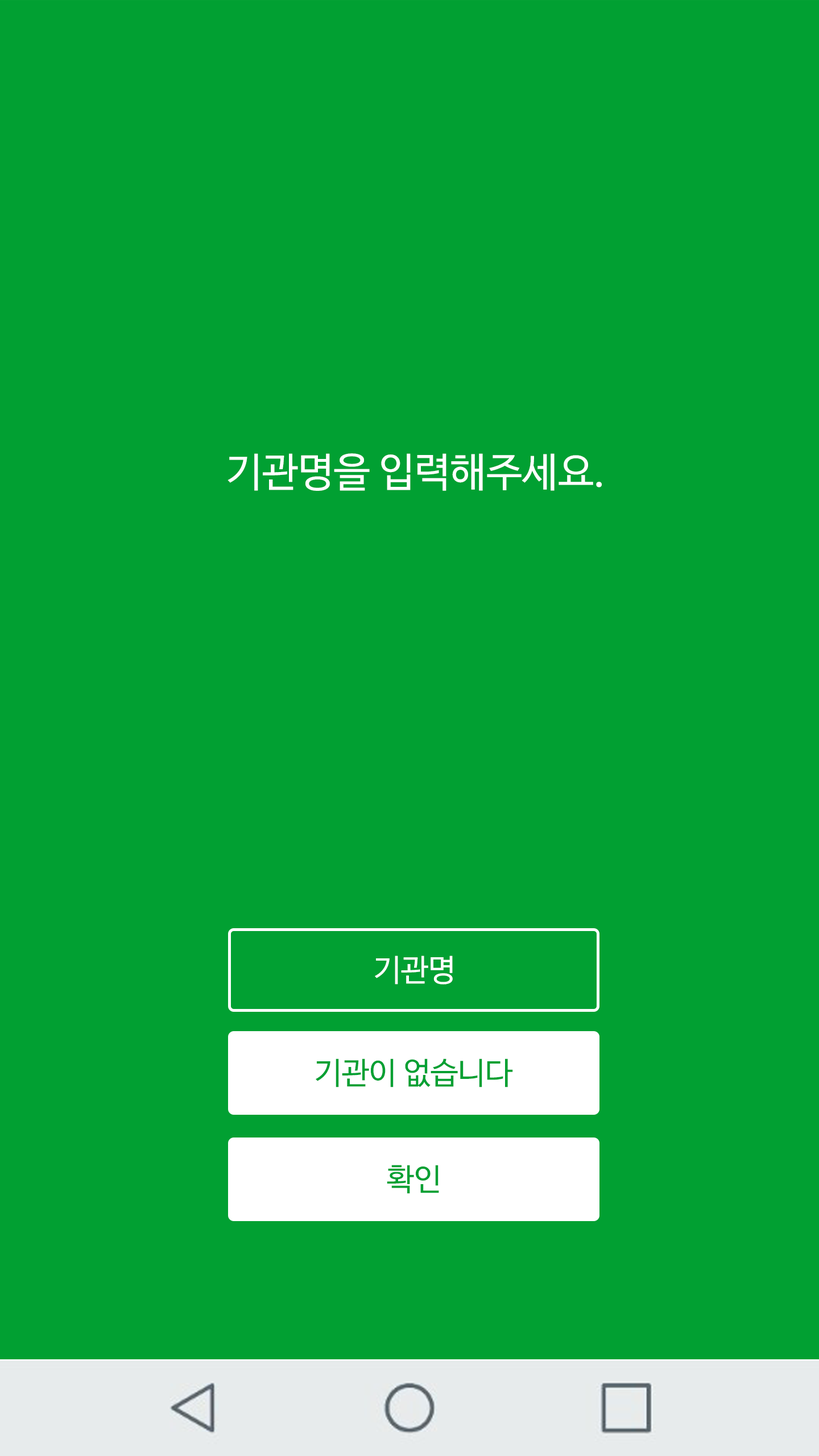
<style>
.page{position:relative;width:819px;height:1456px;background:#01a032}
.page>*{position:absolute;margin:0}
.t1{font:40.3px "NanumBarunGothicOTF";color:#ffffff}
.t2{font:30.8px "NanumBarunGothicOTF";color:#ffffff}
.t3{font:30.8px "NanumBarunGothicOTF";color:#01a032}
</style>
<div class="page">
<p class="t1" style="left:227px;top:453px;width:375px;height:38px">기관명을 입력해주세요.</p>
<p class="t2" style="left:375px;top:955px;width:78px;height:29px">기관명</p>
<p class="t3" style="left:316px;top:1058px;width:197px;height:29px">기관이 없습니다</p>
<p class="t3" style="left:387px;top:1165px;width:52px;height:29px">확인</p>
</div>
